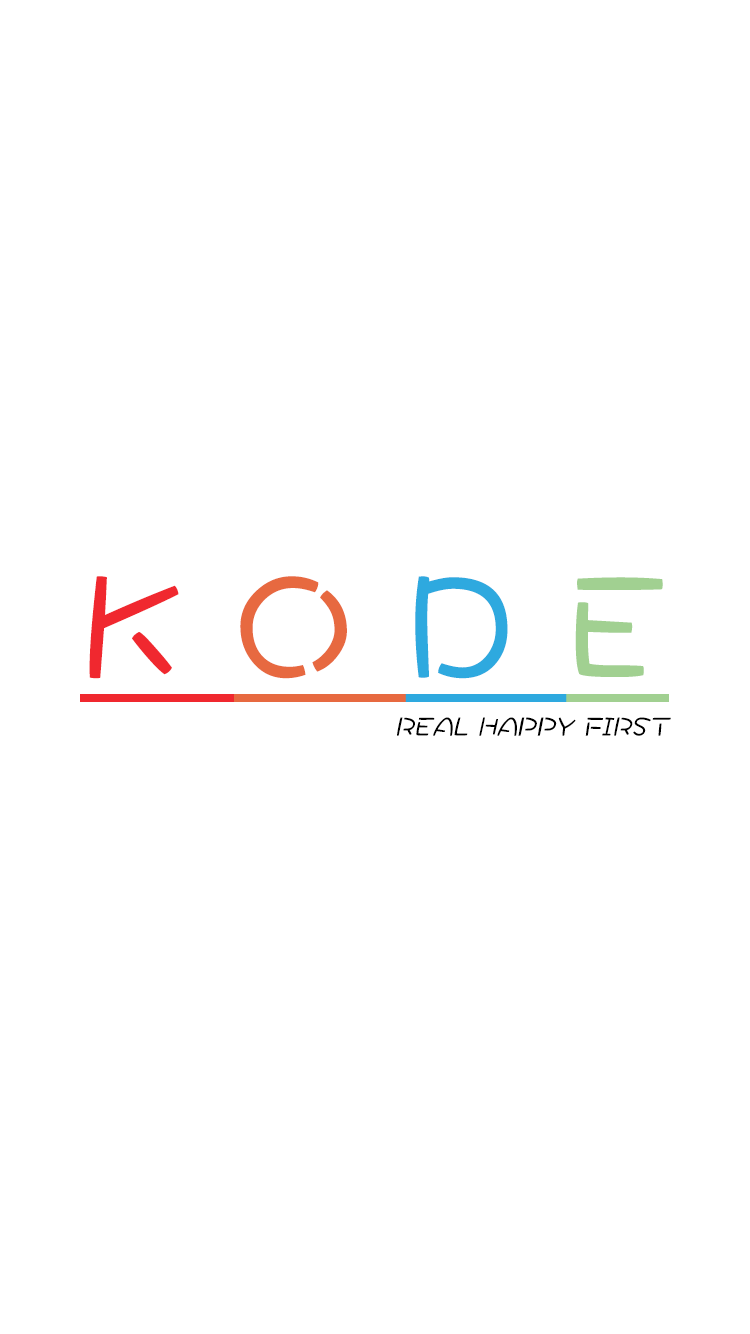
<style>
.page{position:relative;width:750px;height:1334px;background:#ffffff}
.page>*{position:absolute;margin:0}
.t1{font:158.2px "DFPWaWaW5";color:#f0282f;text-decoration:underline}
.t2{font:158.2px "DFPWaWaW5";color:#e76940;text-decoration:underline}
.t3{font:158.2px "DFPWaWaW5";color:#2ea9df;text-decoration:underline}
.t4{font:158.2px "DFPWaWaW5";color:#a1d091;text-decoration:underline}
.t5{font:28.5px "DFPWaWaW5";color:#000000;font-style:italic}
</style>
<div class="page">
<p class="t1" style="left:80px;top:576px;width:589px;height:126px">K <span class="t2">O </span><span class="t3">D </span><span class="t4">E</span></p>
<p class="t5" style="left:397px;top:717px;width:274px;height:19px">REAL HAPPY FIRST</p>
</div>
